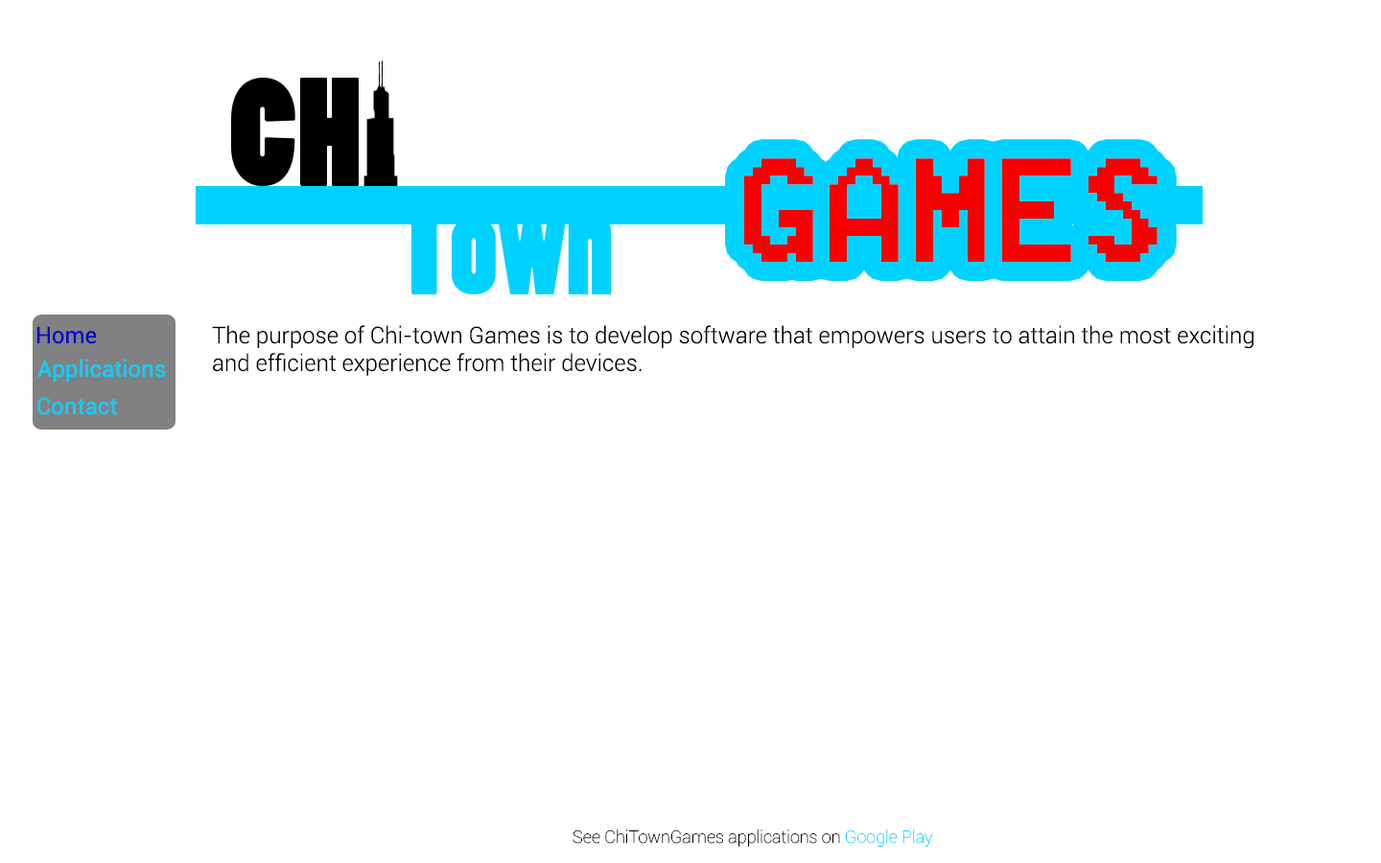
<style>
.page{position:relative;width:1381px;height:863px;background:#ffffff}
.page>*{position:absolute;margin:0}
.t1{font:23px "Roboto-Regular";color:#000ecb}
.t2{font:23px "Roboto-Light";color:#000000}
.t3{font:23px "Roboto-Regular";color:#00d2ff}
.t4{font:17.3px "Roboto-Thin";color:#000000}
.t5{font:17.3px "Roboto-Thin";color:#00d2ff}
</style>
<div class="page">
<p class="t1" style="left:36px;top:326px;width:61px;height:18px">Home</p>
<p class="t2" style="left:212px;top:325px;width:1042px;height:51px">The purpose of Chi-town Games is to develop software that empowers users to attain the most exciting<br>and efficient experience from their devices.</p>
<p class="t3" style="left:37px;top:359px;width:129px;height:23px">Applications</p>
<p class="t3" style="left:37px;top:397px;width:80px;height:18px">Contact</p>
<p class="t4" style="left:573px;top:830px;width:360px;height:17px">See ChiTownGames applications on <span class="t5">Google Play</span></p>
</div>
